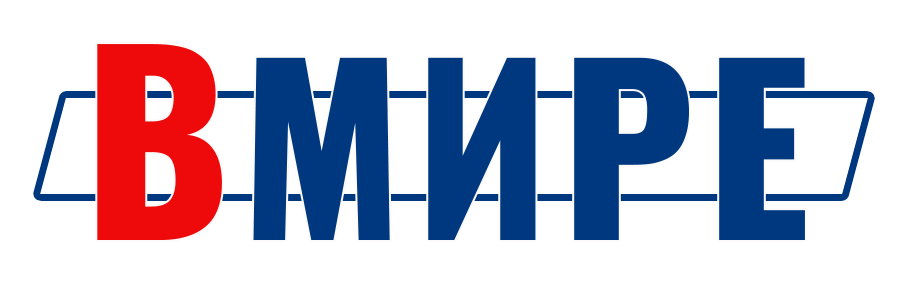
<style>
.page{position:relative;width:900px;height:300px;background:#ffffff}
.page>*{position:absolute;margin:0}
.t1{font:225px "Oswald-Heavy";letter-spacing:0.05em;color:#00387f}
.t2{font:241.7px "Oswald-Heavy";letter-spacing:0.05em;color:#ee0a0a}
</style>
<div class="page">
<p class="t1" style="left:97px;top:44px;width:708px;height:196px"><span class="t2">В</span>МИРЕ</p>
</div>
